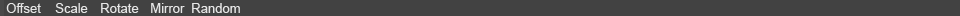
<style>
.page{position:relative;width:960px;height:16px;background:#424242}
.page>*{position:absolute;margin:0}
.t1{font:13px "ArialMT";color:#e5e5e5}
</style>
<div class="page">
<p class="t1" style="left:6px;top:3px;width:35px;height:10px">Offset</p>
<p class="t1" style="left:55px;top:3px;width:33px;height:10px">Scale</p>
<p class="t1" style="left:101px;top:3px;width:38px;height:10px">Rotate</p>
<p class="t1" style="left:151px;top:3px;width:34px;height:10px">Mirror</p>
<p class="t1" style="left:192px;top:3px;width:48px;height:10px">Random</p>
</div>
